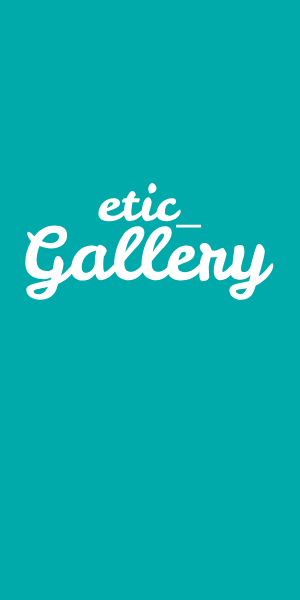
<style>
.page{position:relative;width:300px;height:600px;background:#00aaaa}
.page>*{position:absolute;margin:0}
.t1{font:47.6px "LeckerliOne";color:#ffffff;scale:1.19 1}
.t2{font:72px "LeckerliOne";color:#ffffff}
</style>
<div class="page">
<p class="t1" style="left:98px;top:183px;width:104px;height:45px">etic_</p>
<p class="t2" style="left:25px;top:225px;width:249px;height:75px">Gallery</p>
</div>
